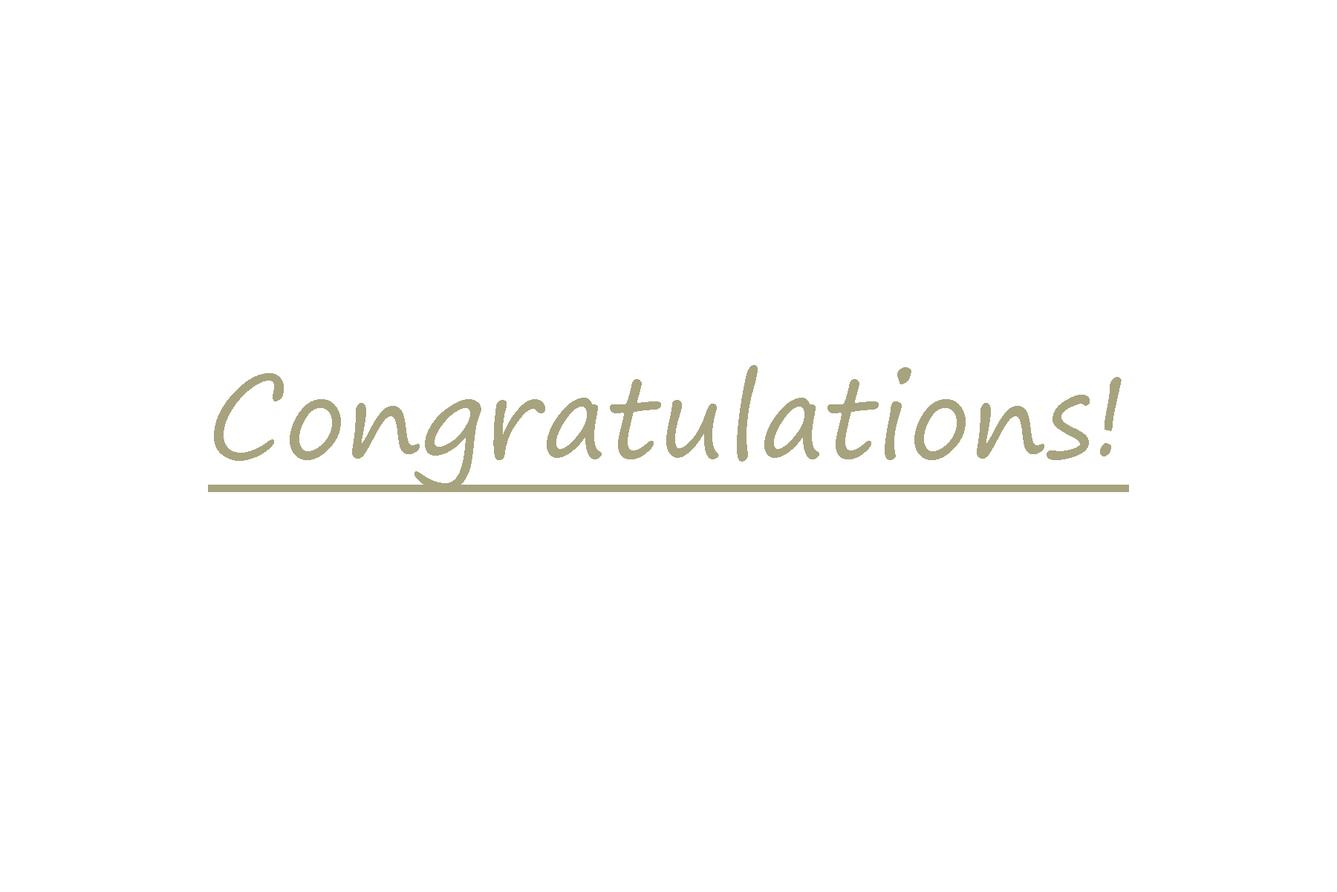
<style>
.page{position:relative;width:1337px;height:892px;background:#ffffff}
.page>*{position:absolute;margin:0}
.t1{font:111.5px "SegoePrint";color:#a6a37e;text-decoration:underline}
</style>
<div class="page">
<p class="t1" style="left:208px;top:365px;width:921px;height:127px">Congratulations!</p>
</div>
